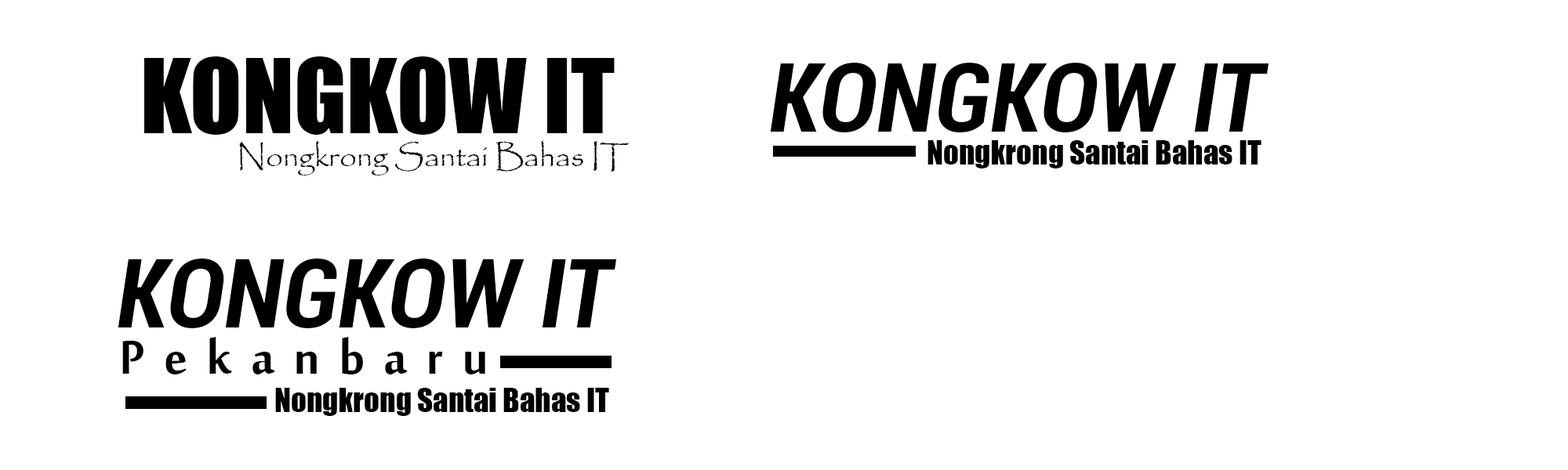
<style>
.page{position:relative;width:1568px;height:470px;background:#ffffff}
.page>*{position:absolute;margin:0}
.t1{font:95.6px "Impact";color:#000000}
.t2{font:95.6px "Roboto-BoldCondensedItalic";color:#000000}
.t3{font:30.6px "Papyrus-Regular";color:#000000}
.t4{font:30.6px "Impact";color:#000000}
.t5{font:72.1px "MoolBoran";letter-spacing:0.26em;color:#000000}
</style>
<div class="page">
<p class="t1" style="left:144px;top:56px;width:471px;height:79px">KONGKOW IT</p>
<p class="t2" style="left:770px;top:63px;width:499px;height:69px">KONGKOW IT</p>
<p class="t3" style="left:239px;top:140px;width:390px;height:36px">Nongkrong Santai Bahas IT</p>
<p class="t4" style="left:927px;top:140px;width:334px;height:29px">Nongkrong Santai Bahas IT</p>
<p class="t2" style="left:118px;top:259px;width:499px;height:69px">KONGKOW IT</p>
<p class="t5" style="left:122px;top:337px;width:363px;height:38px">Pekanbaru</p>
<p class="t4" style="left:275px;top:388px;width:334px;height:28px">Nongkrong Santai Bahas IT</p>
</div>
